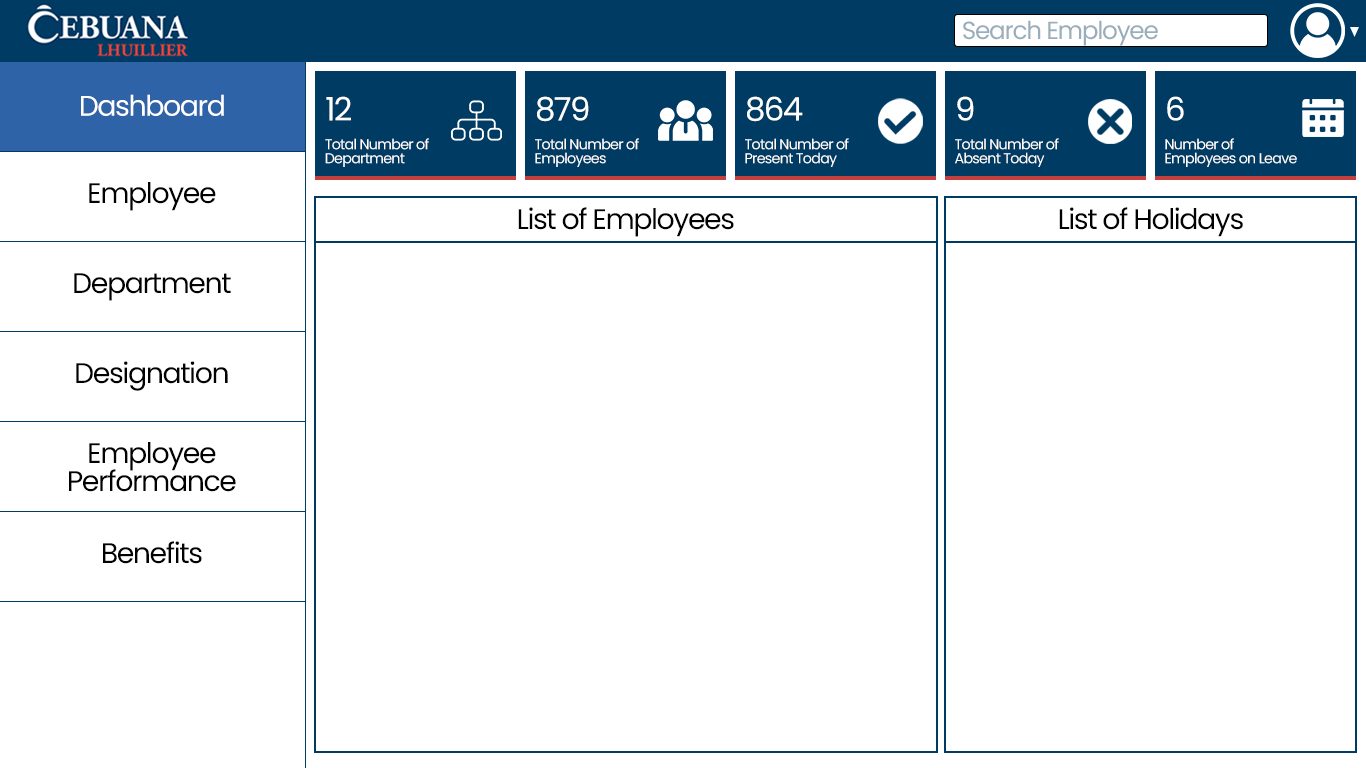
<style>
.page{position:relative;width:1366px;height:768px;background:#ffffff}
.page>*{position:absolute;margin:0}
.t1{font:24.7px "Poppins-Regular";letter-spacing:-0.05em;color:#9aadba}
.t2{font:28.4px "Poppins-Regular";letter-spacing:-0.05em;color:#ffffff}
.t3{font:32.3px "Poppins-Regular";letter-spacing:-0.05em;color:#ffffff}
.t4{font:14.3px/14.1px "Poppins-Regular";letter-spacing:-0.05em;color:#ffffff}
.t5{font:28.4px "Poppins-Regular";letter-spacing:-0.05em;color:#010101}
.t6{font:28.4px/28px "Poppins-Regular";letter-spacing:-0.05em;color:#010101}
</style>
<div class="page">
<p class="t1" style="left:963px;top:20px;width:195px;height:26px">Search Employee</p>
<p class="t2" style="left:81px;top:94px;width:143px;height:22px">Dashboard</p>
<p class="t3" style="left:326px;top:96px;width:25px;height:25px">12</p>
<p class="t3" style="left:537px;top:96px;width:52px;height:26px">879</p>
<p class="t3" style="left:747px;top:96px;width:56px;height:26px">864</p>
<p class="t3" style="left:957px;top:96px;width:17px;height:25px">9</p>
<p class="t3" style="left:1167px;top:96px;width:17px;height:25px">6</p>
<p class="t4" style="left:325px;top:138px;width:104px;height:29px">Total Number of<br>Department</p>
<p class="t4" style="left:535px;top:138px;width:104px;height:29px">Total Number of<br>Employees</p>
<p class="t4" style="left:745px;top:138px;width:104px;height:29px">Total Number of<br>Present Today</p>
<p class="t4" style="left:955px;top:138px;width:104px;height:29px">Total Number of<br>Absent Today</p>
<p class="t4" style="left:1165px;top:138px;width:132px;height:29px">Number of <br>Employees on Leave</p>
<p class="t5" style="left:89px;top:182px;width:127px;height:29px">Employee</p>
<p class="t5" style="left:518px;top:207px;width:216px;height:30px">List of Employees</p>
<p class="t5" style="left:1059px;top:207px;width:184px;height:30px">List of Holidays</p>
<p class="t5" style="left:74px;top:273px;width:157px;height:28px">Department</p>
<p class="t5" style="left:76px;top:361px;width:152px;height:30px">Designation</p>
<p class="t6" style="left:69px;top:442px;width:167px;height:50px;text-align:center">Employee<br>Performance</p>
<p class="t5" style="left:103px;top:541px;width:99px;height:23px">Benefits</p>
</div>
